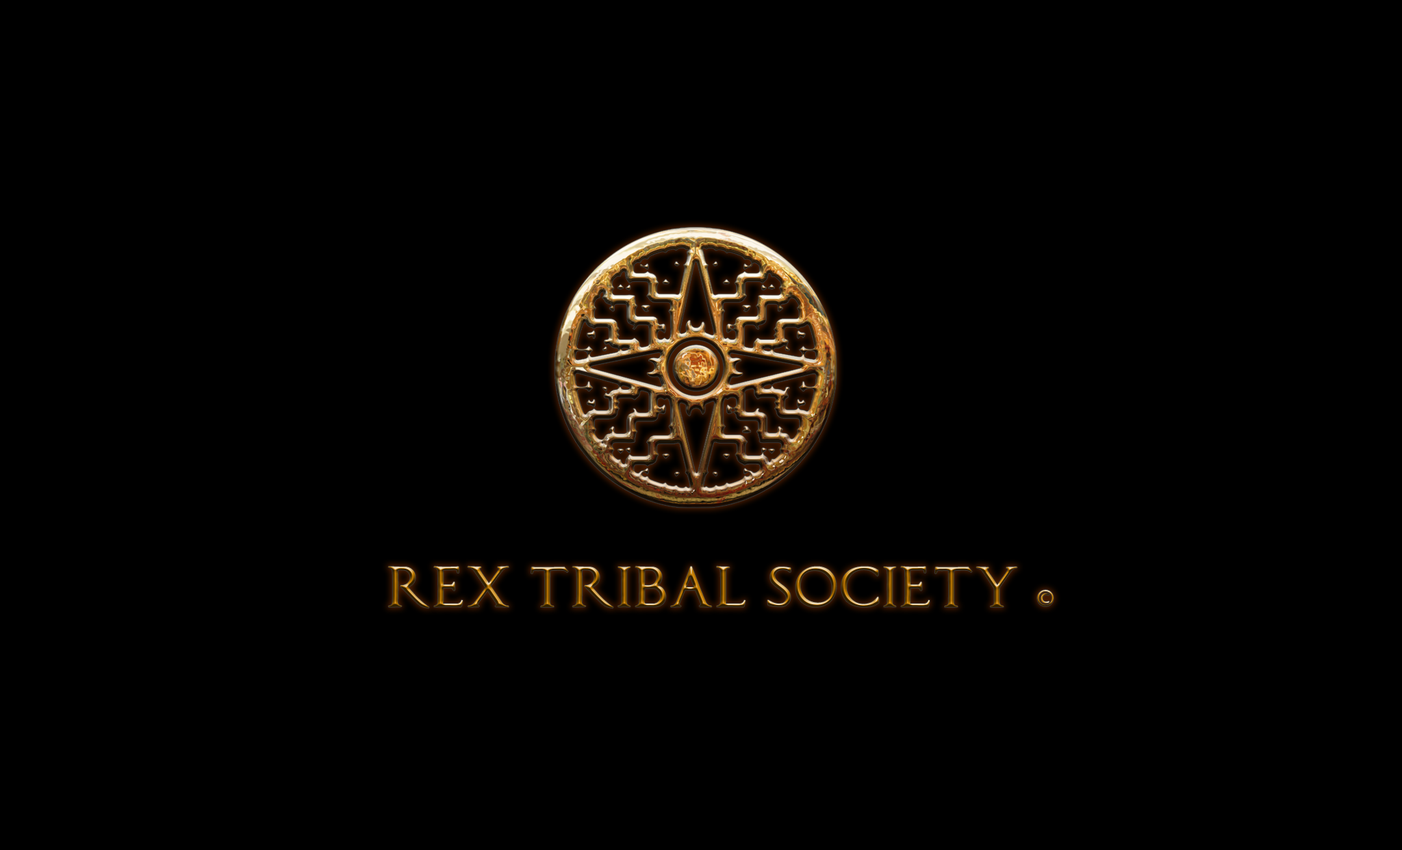
<style>
.page{position:relative;width:1402px;height:850px;background:#000000}
.page>*{position:absolute;margin:0}
.t1{font:50.7px "CapitalisTypOasisMedium"}
.t2{font:26px "MyriadPro-Regular"}
</style>
<div class="page">
<p class="t1" style="left:388px;top:566px;width:666px;height:43px">REX TRIBAL SOCIETY <span class="t2">©</span></p>
</div>
